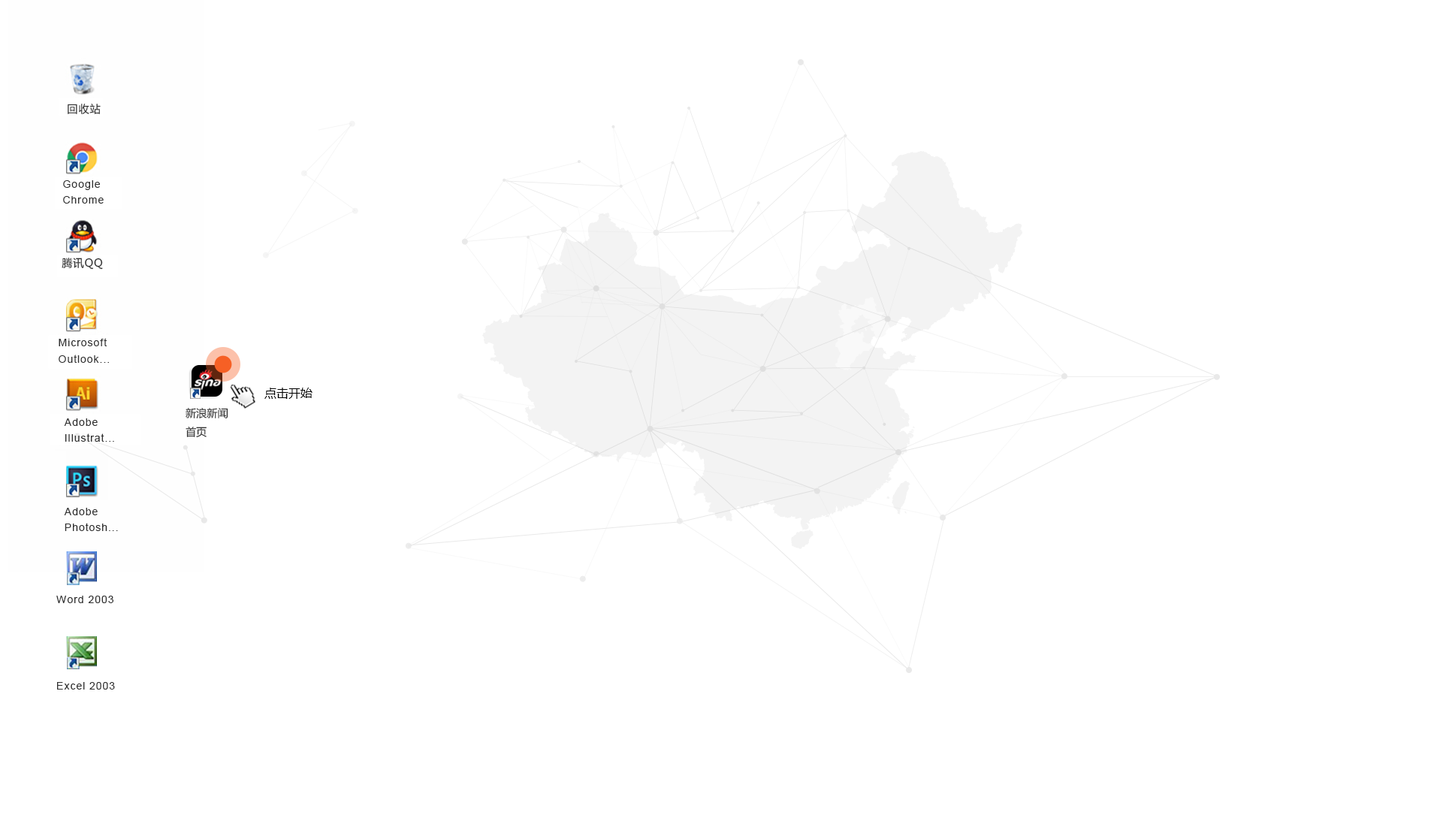
<style>
.page{position:relative;width:1437px;height:830px;background:#ffffff}
.page>*{position:absolute;margin:0}
.t1{font:10.7px "MicrosoftYaHei";letter-spacing:0.06em;color:#303030}
.t2{font:10.7px/16px "ArialMT";letter-spacing:0.06em;color:#303030}
.t3{font:12px "MicrosoftYaHei";color:#000000}
.t4{font:10.7px/18.8px "MicrosoftYaHei";color:#303030}
.t5{font:10.7px "ArialMT";letter-spacing:0.06em;color:#303030}
</style>
<div class="page">
<p class="t1" style="left:68px;top:104px;width:33px;height:10px">回收站</p>
<p class="t2" style="left:63px;top:180px;width:41px;height:24px">Google<br>Chrome</p>
<p class="t1" style="left:62px;top:258px;width:41px;height:12px">腾讯QQ</p>
<p class="t2" style="left:59px;top:338px;width:50px;height:25px">Microsoft<br>Outlook...</p>
<p class="t3" style="left:264px;top:388px;width:48px;height:11px">点击开始</p>
<p class="t4" style="left:186px;top:408px;width:42px;height:30px">新浪新闻<br>首页</p>
<p class="t2" style="left:64px;top:418px;width:50px;height:24px">Adobe<br>Illustrat...</p>
<p class="t2" style="left:64px;top:508px;width:54px;height:23px">Adobe<br>Photosh...</p>
<p class="t5" style="left:56px;top:596px;width:57px;height:7px">Word 2003</p>
<p class="t5" style="left:57px;top:682px;width:58px;height:7px">Excel 2003</p>
</div>
